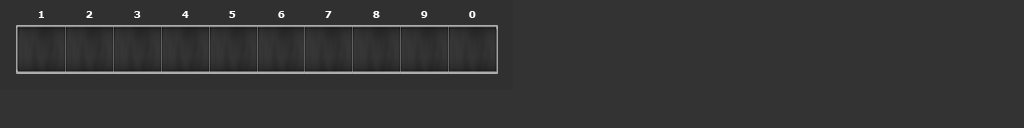
<style>
.page{position:relative;width:1024px;height:128px;background:#333333}
.page>*{position:absolute;margin:0}
.t1{font:10px "Verdana-Bold";color:#ffffff}
</style>
<div class="page">
<p class="t1" style="left:38px;top:11px;width:6px;height:7px">1</p>
<p class="t1" style="left:86px;top:11px;width:7px;height:7px">2</p>
<p class="t1" style="left:134px;top:11px;width:7px;height:7px">3</p>
<p class="t1" style="left:182px;top:11px;width:7px;height:7px">4</p>
<p class="t1" style="left:229px;top:11px;width:7px;height:7px">5</p>
<p class="t1" style="left:278px;top:11px;width:7px;height:7px">6</p>
<p class="t1" style="left:325px;top:11px;width:7px;height:7px">7</p>
<p class="t1" style="left:373px;top:11px;width:7px;height:7px">8</p>
<p class="t1" style="left:421px;top:11px;width:7px;height:7px">9</p>
<p class="t1" style="left:469px;top:11px;width:7px;height:7px">0</p>
</div>
